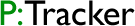
<style>
.page{position:relative;width:135px;height:26px;background:#ffffff}
.page>*{position:absolute;margin:0}
.t1{font:36px "GillSansMT";color:#000000}
.t2{font:36px "GillSansMT";color:#008e0a}
</style>
<div class="page">
<p class="t1" style="left:0px;top:0px;width:135px;height:26px"><span class="t2">P:</span>Tracker</p>
</div>
